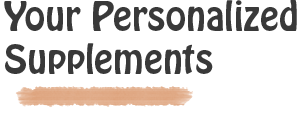
<style>
.page{position:relative;width:300px;height:114px;background:#ffffff}
.page>*{position:absolute;margin:0}
.t1{font:36px "HoboStd";color:#3a3a3a}
</style>
<div class="page">
<p class="t1" style="left:4px;top:0px;width:293px;height:74px">Your Personalized Supplements</p>
</div>
